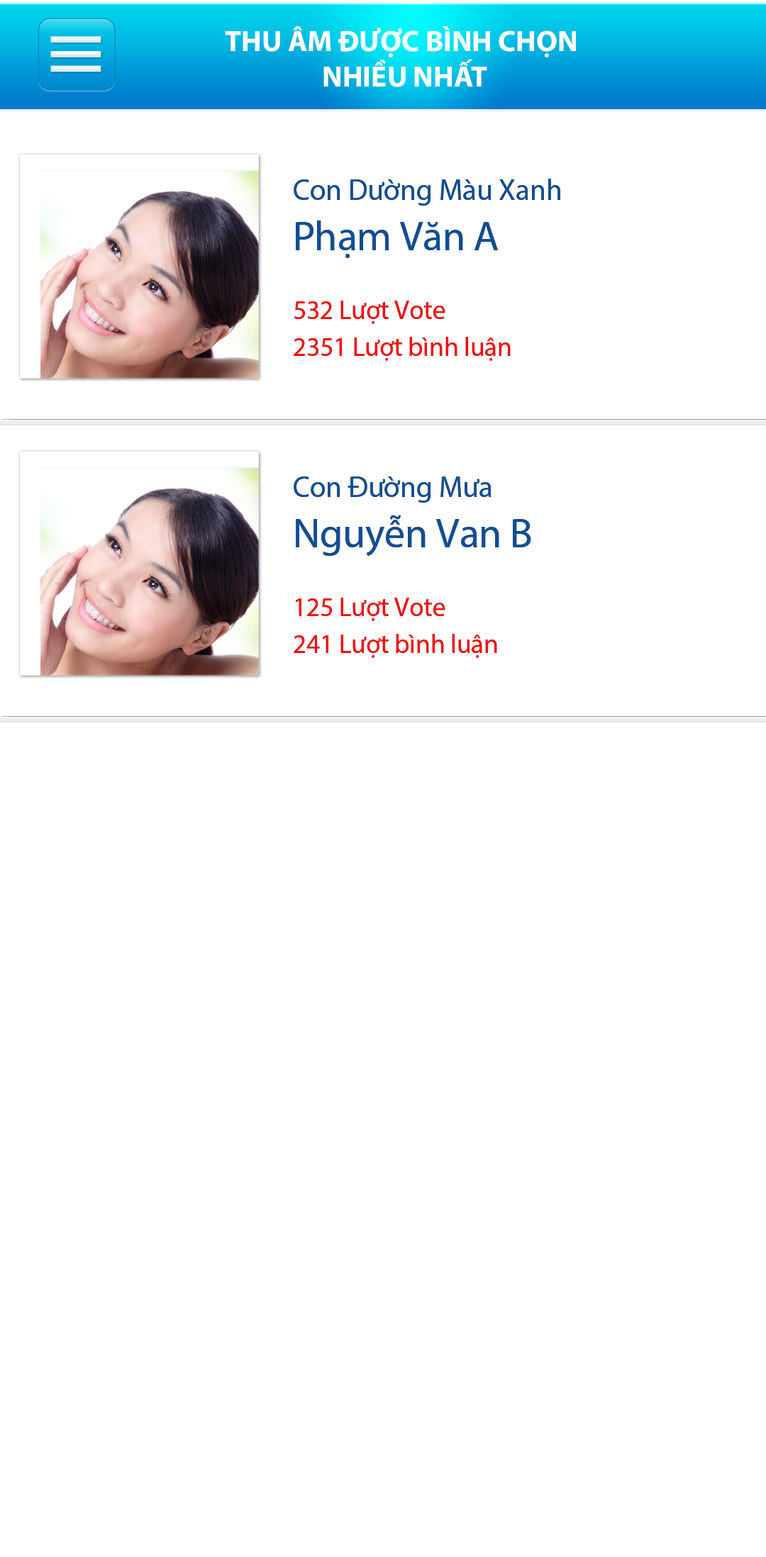
<style>
.page{position:relative;width:766px;height:1557px;background:#ffffff}
.page>*{position:absolute;margin:0}
.t1{font:29.5px "MyriadPro-Bold";color:#ffffff}
.t2{font:29.5px "MyriadPro-Regular";letter-spacing:-0.005em;color:#0e4e96}
.t3{font:41.4px "MyriadPro-Regular";letter-spacing:-0.005em;color:#0e4e96}
.t4{font:26.6px "MyriadPro-Regular";letter-spacing:-0.005em;color:#ff0100}
</style>
<div class="page">
<p class="t1" style="left:225px;top:26px;width:351px;height:61px;text-align:center">THU ÂM ĐƯỢC BÌNH CHỌN<br> NHIỀU NHẤT</p>
<p class="t2" style="left:294px;top:179px;width:266px;height:27px">Con Dường Màu Xanh</p>
<p class="t3" style="left:296px;top:221px;width:202px;height:37px">Phạm Văn A</p>
<p class="t4" style="left:294px;top:301px;width:151px;height:23px">532 Lượt Vote</p>
<p class="t4" style="left:294px;top:337px;width:217px;height:24px">2351 Lượt bình luận</p>
<p class="t2" style="left:294px;top:476px;width:197px;height:27px">Con Đường Mưa</p>
<p class="t3" style="left:296px;top:515px;width:235px;height:42px">Nguyễn Van B</p>
<p class="t4" style="left:295px;top:598px;width:150px;height:23px">125 Lượt Vote</p>
<p class="t4" style="left:294px;top:634px;width:203px;height:24px">241 Lượt bình luận</p>
</div>
